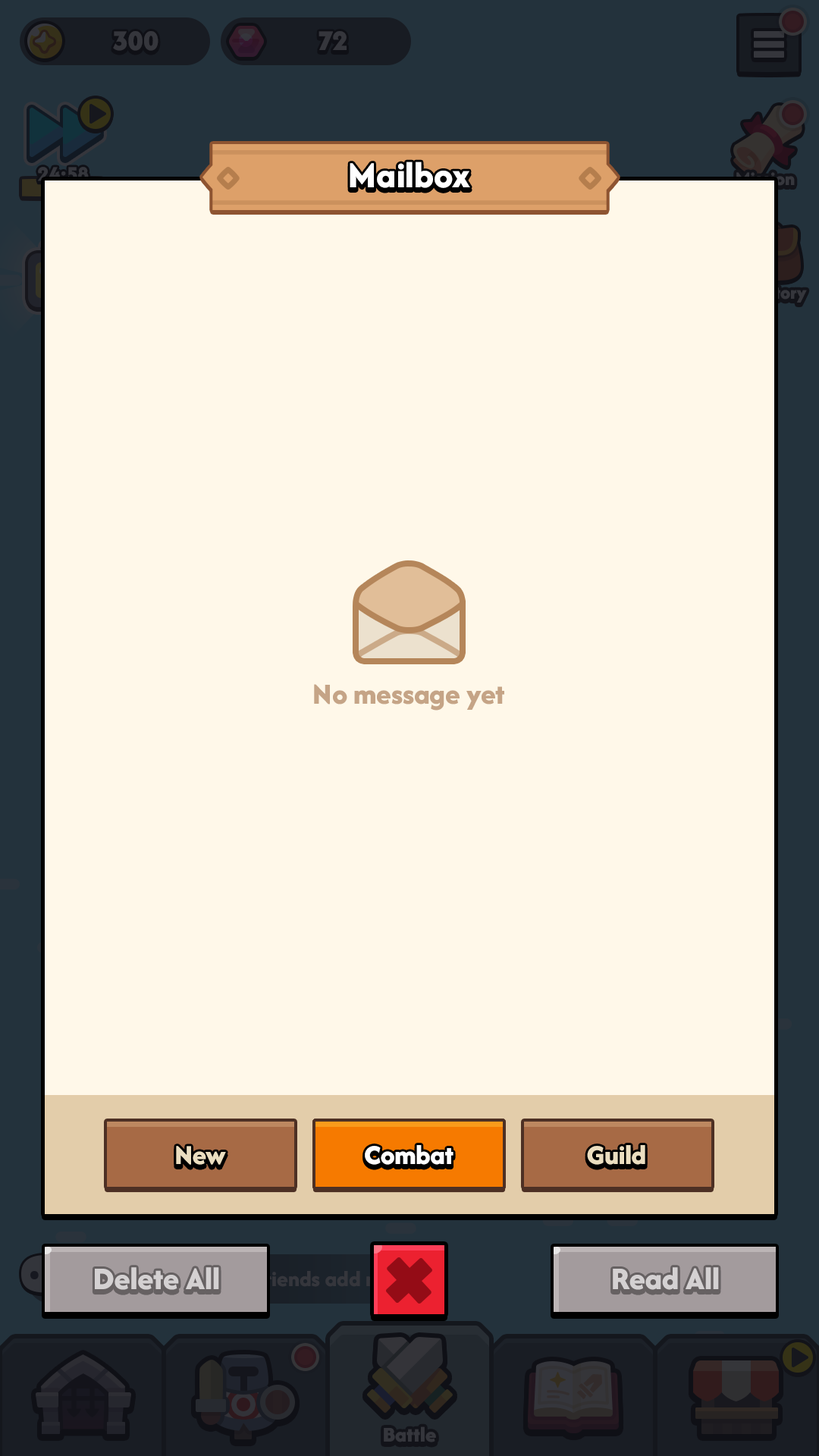
<style>
.page{position:relative;width:819px;height:1456px;background:#fff8e9}
.page>*{position:absolute;margin:0}
.t1{font:37.9px "AfacadFlux-ExtraBold";color:#ffffff}
.t2{font:30.3px "AfacadFlux-ExtraBold";color:#c5a486}
.t3{font:28.4px "AfacadFlux-ExtraBold";color:#ebdec0}
.t4{font:28.4px "AfacadFlux-ExtraBold";color:#ffffff}
.t5{font:28.4px "AfacadFlux-ExtraBold"}
.t6{font:32.8px "AfacadFlux-ExtraBold";color:#d4d1d2}
</style>
<div class="page">
<p class="t1" style="left:350px;top:162px;width:120px;height:26px">Mailbox</p>
<p class="t2" style="left:314px;top:684px;width:190px;height:27px">No message yet</p>
<p class="t3" style="left:176px;top:1146px;width:50px;height:19px">New</p>
<p class="t4" style="left:365px;top:1145px;width:88px;height:20px">Combat</p>
<p class="t5" style="left:366px;top:1145px;width:84px;height:25px">Weekly</p>
<p class="t3" style="left:587px;top:1145px;width:58px;height:20px">Guild</p>
<p class="t6" style="left:95px;top:1267px;width:124px;height:23px">Delete All</p>
<p class="t6" style="left:613px;top:1267px;width:106px;height:23px">Read All</p>
</div>
